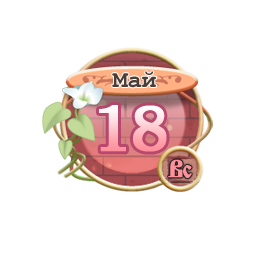
<style>
.page{position:relative;width:256px;height:256px;background:#ffffff}
.page>*{position:absolute;margin:0}
.t1{font:24px "CourierNewPS-BoldMT";color:#4d3e35}
.t2{font:100px "EucrosiaUPC";letter-spacing:-0.075em;font-weight:bold}
.t3{font:24px "IzhitsaCyrillic";letter-spacing:-0.075em;color:#fd929c;font-weight:bold}
</style>
<div class="page">
<p class="t1" style="left:112px;top:71px;width:44px;height:17px">Май</p>
<p class="t2" style="left:99px;top:105px;width:68px;height:47px">18</p>
<p class="t3" style="left:168px;top:159px;width:24px;height:19px">Вс</p>
</div>
